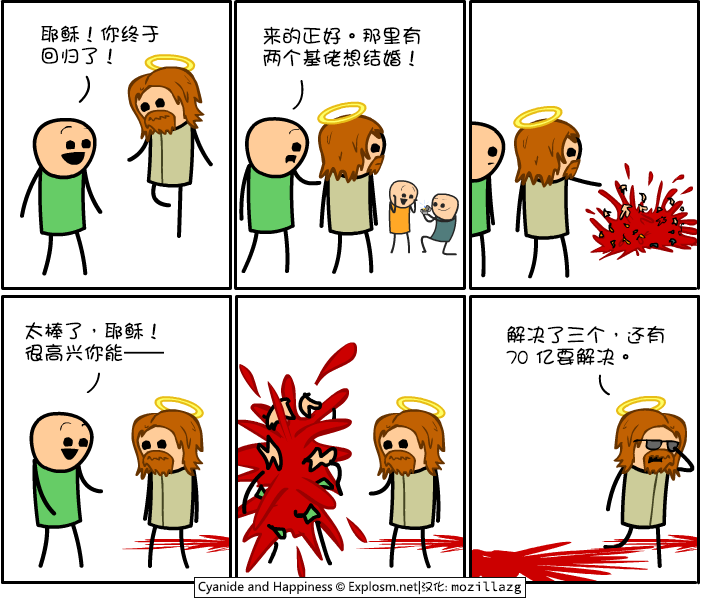
<style>
.page{position:relative;width:701px;height:599px;background:#ffffff}
.page>*{position:absolute;margin:0}
.t1{font:20px/22px "DFGirl";color:#000000}
</style>
<div class="page">
<p class="t1" style="left:41px;top:25px;width:118px;height:40px">耶稣！你终于<br>回归了！</p>
<p class="t1" style="left:263px;top:26px;width:158px;height:41px">来的正好。那里有<br>两个基佬想结婚！</p>
<p class="t1" style="left:25px;top:322px;width:139px;height:40px">太棒了，耶稣！<br>很高兴你能——</p>
<p class="t1" style="left:506px;top:325px;width:159px;height:41px">解决了三个，还有<br>70 亿要解决。</p>
</div>
